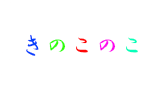
<style>
.page{position:relative;width:160px;height:90px;background:#ffffff}
.page>*{position:absolute;margin:0}
.t1{font:25px "HGGyoshotai";color:#0741fe}
.t2{font:25px "HGGyoshotai";color:#30fe07}
.t3{font:25px "HGGyoshotai";color:#fe0707}
.t4{font:25px "HGGyoshotai";color:#fe07ef}
.t5{font:25px "HGGyoshotai";color:#07febb}
</style>
<div class="page">
<p class="t1" style="left:26px;top:34px;width:112px;height:22px">き<span class="t2">の</span><span class="t3">こ</span><span class="t4">の</span><span class="t5">こ</span></p>
</div>
